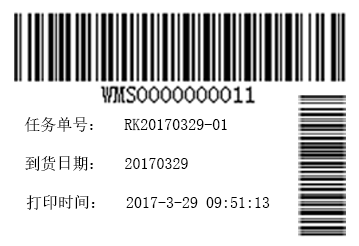
<style>
.page{position:relative;width:359px;height:246px;background:#ffffff}
.page>*{position:absolute;margin:0}
.t1{font:12px "SimSun";color:#000000}
.t2{font:16px "SimSun";color:#000000}
</style>
<div class="page">
<p class="t1" style="left:24px;top:117px;width:203px;height:15px">任务单号：   RK20170329-01</p>
<p class="t1" style="left:25px;top:156px;width:163px;height:15px">到货日期：   20170329</p>
<p class="t2" style="left:26px;top:195px;width:244px;height:15px">打印时间：   2017-3-29 09:51:13</p>
</div>
